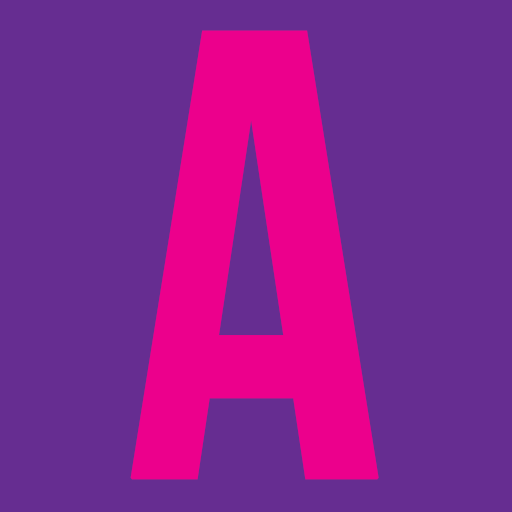
<style>
.page{position:relative;width:512px;height:512px;background:#662d91}
.page>*{position:absolute;margin:0}
.t1{font:636.8px "BebasNeueBold";color:#ec008c;font-weight:bold}
</style>
<div class="page">
<p class="t1" style="left:130px;top:30px;width:249px;height:450px">A</p>
</div>
